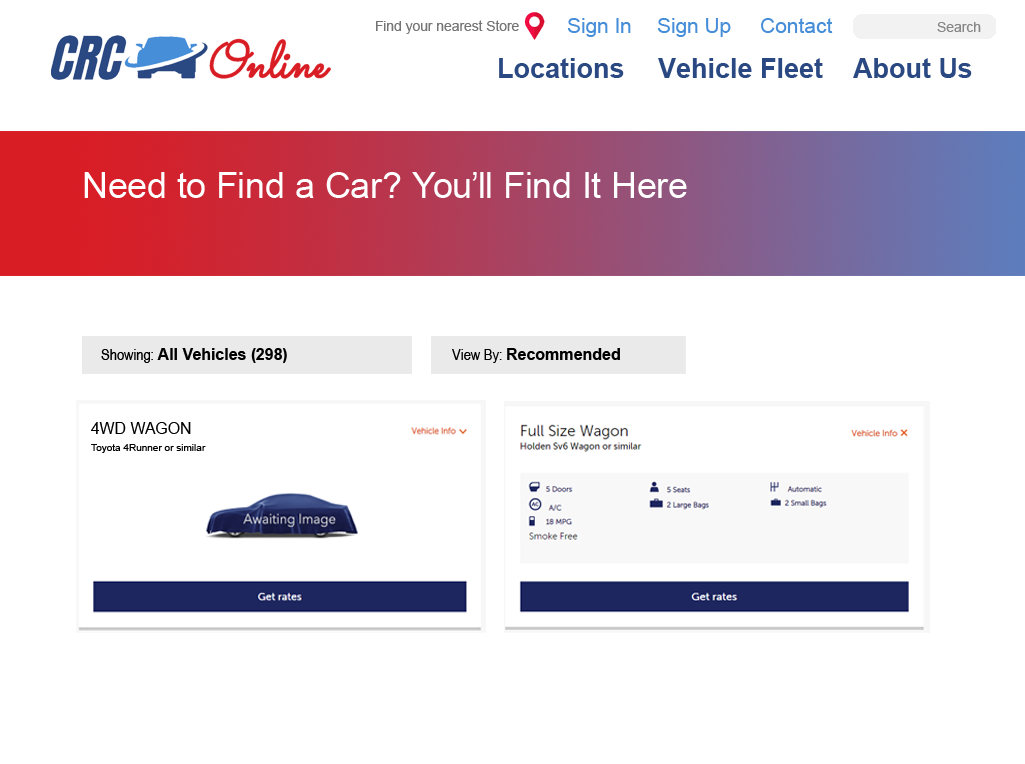
<style>
.page{position:relative;width:1025px;height:764px;background:#ffffff}
.page>*{position:absolute;margin:0}
.t1{font:14px "ArialMT";color:#757575}
.t2{font:21px "ArialMT";color:#478ed8}
.t3{font:14px "ArialMT";color:#878787}
.t4{font:27px "Arial-BoldMT";color:#2a4882}
.t5{font:36px "ArialMT";color:#ffffff}
.t6{font:16px "Arial-BoldMT";color:#000000}
.t7{font:16px "ArialNarrow";color:#000000}
.t8{font:16px "ArialMT";color:#000000}
.t9{font:10px "ArialMT";color:#000000}
</style>
<div class="page">
<p class="t1" style="left:376px;top:20px;width:143px;height:14px">Find your nearest Store</p>
<p class="t2" style="left:567px;top:18px;width:64px;height:19px">Sign In</p>
<p class="t2" style="left:657px;top:18px;width:74px;height:19px">Sign Up</p>
<p class="t2" style="left:761px;top:18px;width:72px;height:15px">Contact</p>
<p class="t3" style="left:937px;top:22px;width:44px;height:10px">Search</p>
<p class="t4" style="left:499px;top:58px;width:125px;height:20px">Locations</p>
<p class="t4" style="left:658px;top:58px;width:165px;height:20px">Vehicle Fleet</p>
<p class="t4" style="left:853px;top:58px;width:119px;height:20px">About Us</p>
<p class="t5" style="left:84px;top:172px;width:603px;height:26px">Need to Find a Car? You’ll Find It Here</p>
<p class="t6" style="left:101px;top:348px;width:186px;height:15px"><span class="t7">Showing: </span>All Vehicles (298)</p>
<p class="t6" style="left:452px;top:348px;width:168px;height:15px"><span class="t7">View By: </span>Recommended</p>
<p class="t8" style="left:91px;top:422px;width:100px;height:12px">4WD WAGON</p>
<p class="t9" style="left:91px;top:444px;width:115px;height:9px">Toyota 4Runner or similar</p>
</div>
